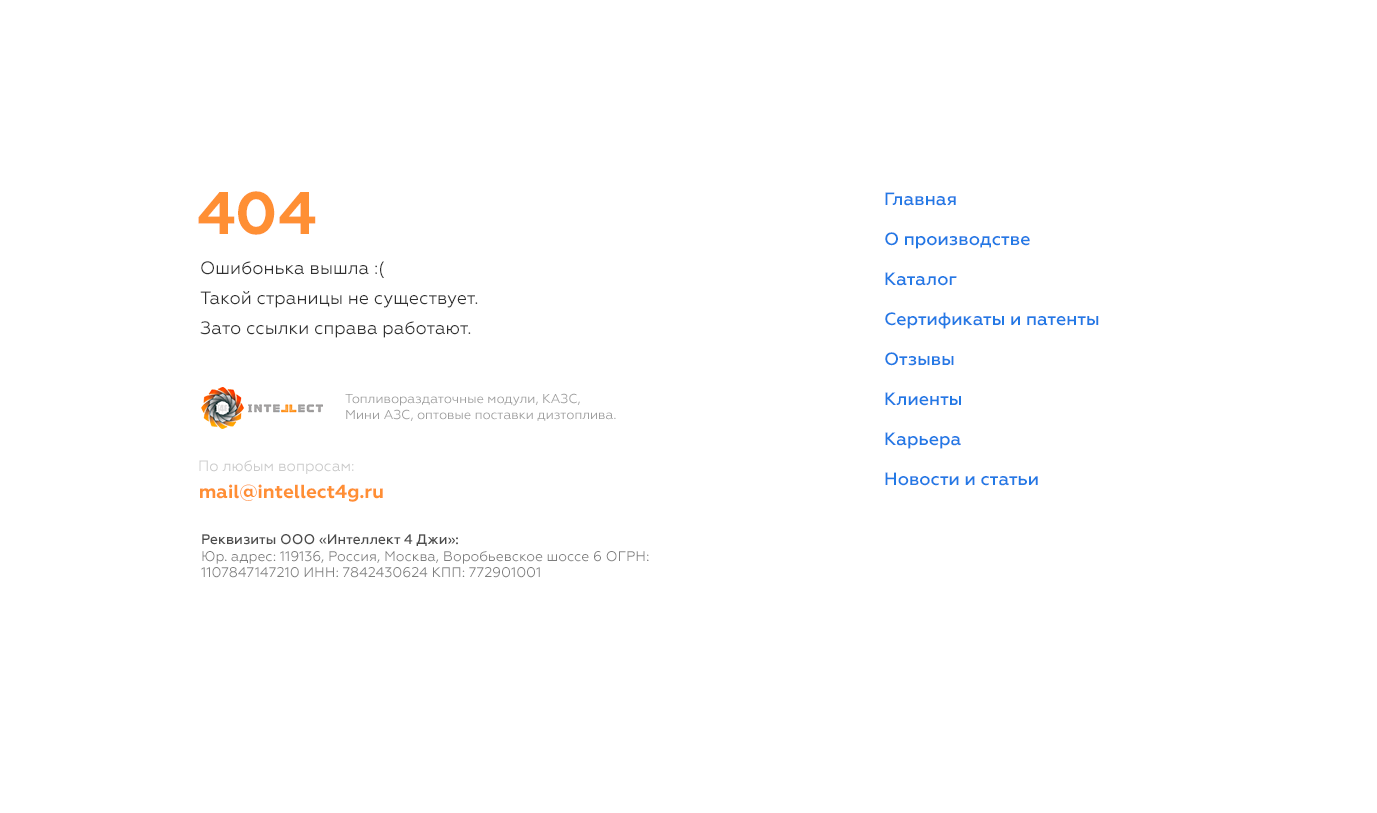
<style>
.page{position:relative;width:1377px;height:813px;background:#ffffff}
.page>*{position:absolute;margin:0}
.t1{font:60px "Geometria-Bold";color:#ff8f34}
.t2{font:18px/40px "Geometria-Medium";color:#2279e5}
.t3{font:18px/30px "Geometria";color:#303030}
.t4{font:13px "Geometria";color:#9d9d9d}
.t5{font:15px "Geometria";color:#c9c9c9}
.t6{font:19px "Geometria-Bold";color:#ff8f34}
.t7{font:14px "Geometria";color:#7e7e7e}
.t8{font:14px "Geometria-Medium";color:#4c4c4c}
</style>
<div class="page">
<p class="t1" style="left:198px;top:191px;width:118px;height:44px">404</p>
<p class="t2" style="left:885px;top:192px;width:214px;height:294px">Главная                         <br>О производстве<br>Каталог                         <br>Сертификаты и патенты                          <br>Отзывы                         <br>Клиенты                        <br>Карьера                      <br>Новости и статьи</p>
<p class="t3" style="left:200px;top:261px;width:278px;height:77px">Ошибонька вышла :(<br>Такой страницы не существует.<br>Зато ссылки справа работают.</p>
<p class="t4" style="left:345px;top:393px;width:271px;height:28px">Топливораздаточные модули, КАЗС, <br>Мини АЗС, оптовые поставки дизтоплива.</p>
<p class="t5" style="left:199px;top:460px;width:155px;height:14px">По любым вопросам:</p>
<p class="t6" style="left:200px;top:484px;width:183px;height:18px">mail@intellect4g.ru</p>
<p class="t7" style="left:201px;top:534px;width:448px;height:44px"><span class="t8">Реквизиты ООО «Интеллект 4 Джи»: <br></span>Юр. адрес: 119136, Россия, Москва, Воробьевское шоссе 6 ОГРН: 1107847147210 ИНН: 7842430624 КПП: 772901001</p>
</div>
